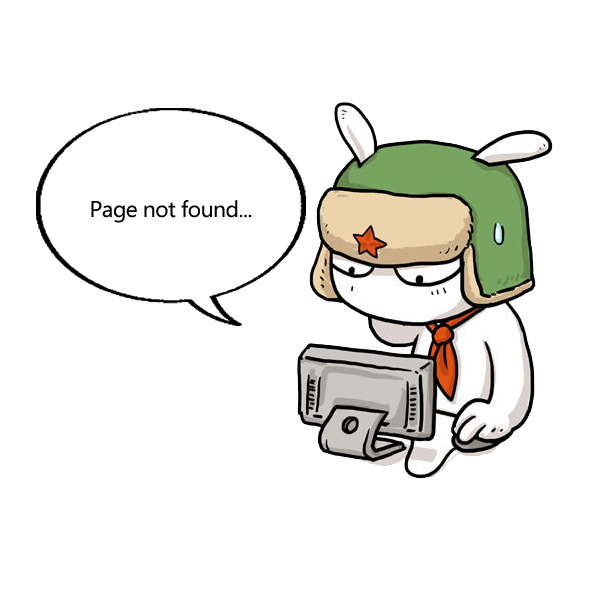
<style>
.page{position:relative;width:591px;height:591px;background:#ffffff}
.page>*{position:absolute;margin:0}
.t1{font:21px "MicrosoftYaHei";letter-spacing:-0.025em;color:#000000}
</style>
<div class="page">
<p class="t1" style="left:91px;top:200px;width:161px;height:23px">Page not found...</p>
</div>
